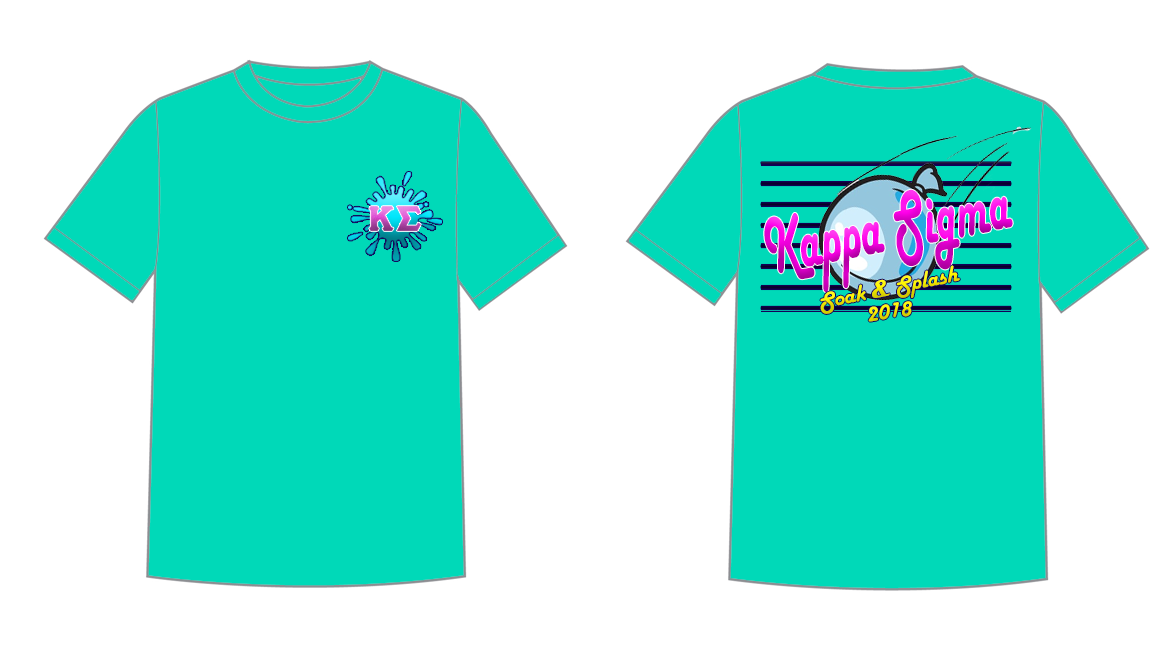
<style>
.page{position:relative;width:1172px;height:649px;background:#ffffff}
.page>*{position:absolute;margin:0}
.t1{font:83.2px "HarlowSolid";scale:0.55 1}
.t2{font:24px "HarlowSolid";color:#f1e800}
.t3{font:24px "Magneto-Bold";color:#f1e800}
</style>
<div class="page">
<p class="t1" style="left:764px;top:189px;width:249px;height:104px;rotate:-11deg">Kappa Sigma</p>
<p class="t2" style="left:820px;top:265px;width:140px;height:49px;rotate:-12deg">Soak <span class="t3">&amp;</span> Splash</p>
<p class="t2" style="left:868px;top:301px;width:44px;height:21px;rotate:-9deg">2018</p>
</div>
